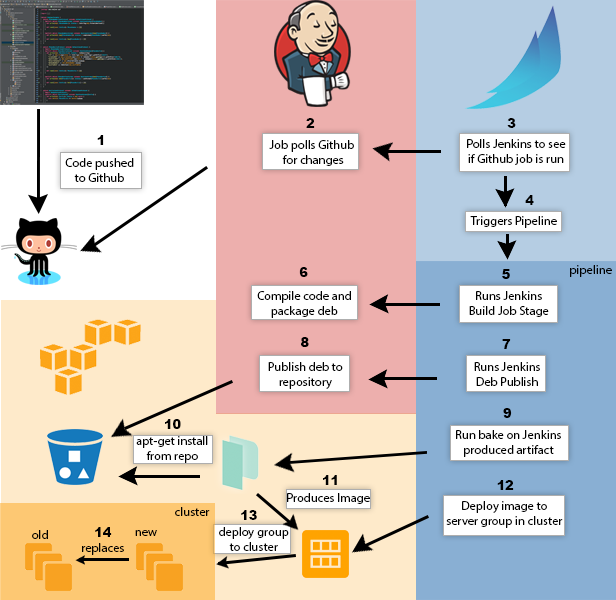
<style>
.page{position:relative;width:616px;height:600px}
.page>*{position:absolute;margin:0}
.t1{font:12.5px "Arial-Black";color:#000000}
.t2{font:12.5px "MyriadPro-Regular";color:#000000}
</style>
<div class="page">
<p class="t1" style="left:306px;top:118px;width:9px;height:10px">2</p>
<p class="t1" style="left:507px;top:118px;width:9px;height:10px">3</p>
<p class="t1" style="left:97px;top:135px;width:7px;height:10px">1</p>
<p class="t2" style="left:269px;top:140px;width:85px;height:26px;text-align:center">Job polls Github <br>for changes</p>
<p class="t2" style="left:467px;top:139px;width:99px;height:26px;text-align:center">Polls Jenkins to see<br>if Github job is run</p>
<p class="t2" style="left:65px;top:158px;width:69px;height:24px;text-align:center">Code pushed<br>to Github</p>
<p class="t1" style="left:525px;top:195px;width:9px;height:10px">4</p>
<p class="t2" style="left:470px;top:216px;width:87px;height:12px">Triggers Pipeline</p>
<p class="t1" style="left:299px;top:267px;width:9px;height:10px">6</p>
<p class="t1" style="left:502px;top:269px;width:8px;height:10px">5</p>
<p class="t2" style="left:570px;top:265px;width:42px;height:12px">pipeline</p>
<p class="t2" style="left:257px;top:291px;width:94px;height:27px;text-align:center">Compile code and<br>package deb</p>
<p class="t2" style="left:469px;top:291px;width:80px;height:26px;text-align:center">Runs Jenkins<br>Build Job Stage</p>
<p class="t1" style="left:301px;top:337px;width:8px;height:10px">8</p>
<p class="t1" style="left:502px;top:339px;width:9px;height:10px">7</p>
<p class="t2" style="left:268px;top:362px;width:75px;height:27px;text-align:center">Publish deb to<br>repository</p>
<p class="t2" style="left:474px;top:362px;width:66px;height:24px;text-align:center">Runs Jenkins<br>Deb Publish</p>
<p class="t1" style="left:503px;top:408px;width:9px;height:10px">9</p>
<p class="t1" style="left:165px;top:419px;width:16px;height:10px">10</p>
<p class="t2" style="left:136px;top:436px;width:72px;height:27px;text-align:center">apt-get install<br>from repo</p>
<p class="t2" style="left:456px;top:430px;width:105px;height:27px;text-align:center">Run bake on Jenkins<br>produced artifact</p>
<p class="t1" style="left:323px;top:475px;width:14px;height:10px">11</p>
<p class="t1" style="left:497px;top:480px;width:17px;height:10px">12</p>
<p class="t2" style="left:287px;top:493px;width:83px;height:11px">Produces Image</p>
<p class="t2" style="left:175px;top:507px;width:35px;height:9px">cluster</p>
<p class="t1" style="left:241px;top:510px;width:16px;height:10px">13</p>
<p class="t2" style="left:446px;top:501px;width:117px;height:27px;text-align:center">Deploy image to<br>server group in cluster</p>
<p class="t2" style="left:32px;top:530px;width:16px;height:9px">old</p>
<p class="t1" style="left:95px;top:527px;width:17px;height:10px">14</p>
<p class="t2" style="left:135px;top:530px;width:22px;height:6px">new</p>
<p class="t2" style="left:219px;top:527px;width:70px;height:24px;text-align:center">deploy group<br>to cluster</p>
<p class="t2" style="left:82px;top:543px;width:42px;height:12px">replaces</p>
</div>
